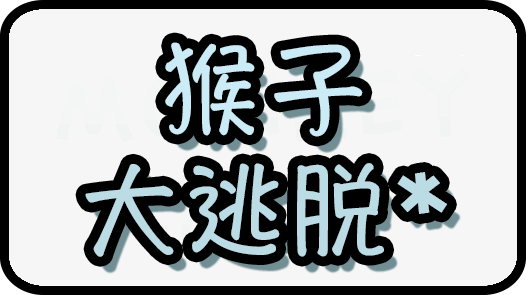
<style>
.page{position:relative;width:526px;height:295px;background:#f6f6f6}
.page>*{position:absolute;margin:0}
.t1{font:100px/120px "HannotateTC-W7";letter-spacing:0.085em;color:#bddbe5}
.t2{font:100px/120px "HannotateTC-W7";letter-spacing:0.125em;color:#bddbe5}
.t3{font:93px/104px "CreativeBlockBB";letter-spacing:0.085em;color:#bddbe5}
</style>
<div class="page">
<p class="t1" style="left:85px;top:42px;width:362px;height:215px;text-align:center"><span class="t2">猴子<br></span>大逃脱<span class="t3">*</span></p>
</div>
